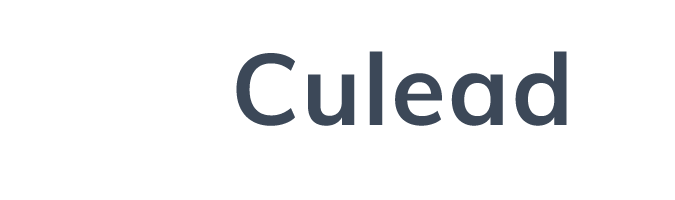
<style>
.page{position:relative;width:675px;height:200px;background:#ffffff}
.page>*{position:absolute;margin:0}
.t1{font:100px "Muli-Bold";letter-spacing:0.02em;color:#3c4858}
</style>
<div class="page">
<p class="t1" style="left:236px;top:51px;width:331px;height:75px">Culead</p>
</div>
